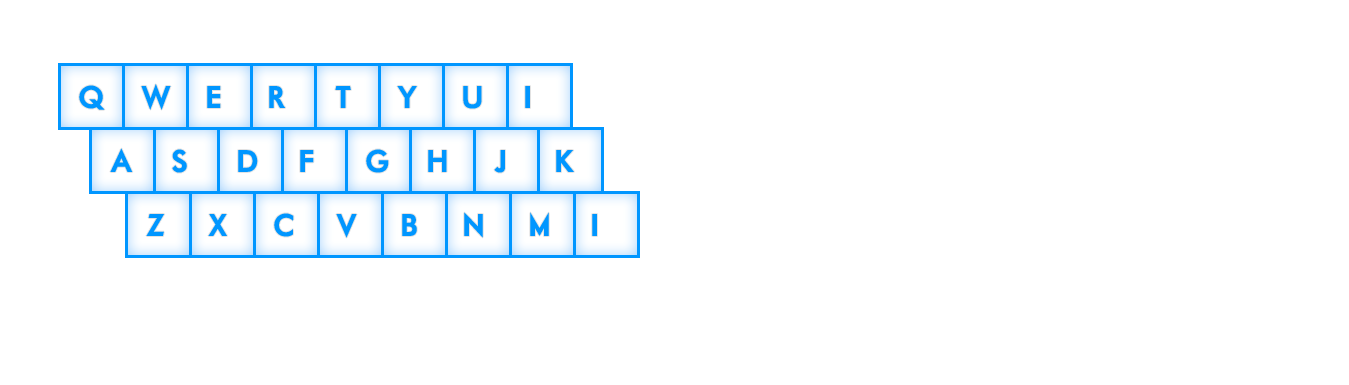
<style>
.page{position:relative;width:1349px;height:385px;background:#ffffff}
.page>*{position:absolute;margin:0}
.t1{font:30px "MotorOil1937M54";color:#0096ff}
</style>
<div class="page">
<p class="t1" style="left:79px;top:85px;width:26px;height:25px">Q</p>
<p class="t1" style="left:141px;top:84px;width:30px;height:26px">W</p>
<p class="t1" style="left:207px;top:86px;width:14px;height:22px">E</p>
<p class="t1" style="left:269px;top:86px;width:17px;height:22px">R</p>
<p class="t1" style="left:335px;top:86px;width:16px;height:22px">T</p>
<p class="t1" style="left:397px;top:86px;width:20px;height:22px">Y</p>
<p class="t1" style="left:463px;top:86px;width:19px;height:23px">U</p>
<p class="t1" style="left:525px;top:86px;width:5px;height:22px">I</p>
<p class="t1" style="left:110px;top:148px;width:23px;height:24px">A</p>
<p class="t1" style="left:172px;top:149px;width:15px;height:24px">S</p>
<p class="t1" style="left:238px;top:150px;width:20px;height:22px">D</p>
<p class="t1" style="left:300px;top:150px;width:14px;height:22px">F</p>
<p class="t1" style="left:366px;top:149px;width:23px;height:24px">G</p>
<p class="t1" style="left:428px;top:150px;width:19px;height:22px">H</p>
<p class="t1" style="left:494px;top:150px;width:11px;height:23px">J</p>
<p class="t1" style="left:556px;top:150px;width:18px;height:22px">K</p>
<p class="t1" style="left:146px;top:214px;width:19px;height:22px">Z</p>
<p class="t1" style="left:208px;top:214px;width:19px;height:22px">X</p>
<p class="t1" style="left:274px;top:213px;width:20px;height:24px">C</p>
<p class="t1" style="left:336px;top:214px;width:21px;height:24px">V</p>
<p class="t1" style="left:402px;top:214px;width:15px;height:22px">B</p>
<p class="t1" style="left:464px;top:212px;width:19px;height:26px">N</p>
<p class="t1" style="left:530px;top:212px;width:19px;height:24px">M</p>
<p class="t1" style="left:592px;top:214px;width:5px;height:22px">I</p>
</div>
